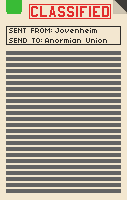
<style>
.page{position:relative;width:127px;height:200px;background:#f3e7d0}
.page>*{position:absolute;margin:0}
.t1{font:8px "04b03";color:#2e2c29}
</style>
<div class="page">
<p class="t1" style="left:9px;top:28px;width:43px;height:15px">SENT FROM:<br>SEND TO:</p>
<p class="t1" style="left:55px;top:28px;width:42px;height:5px">Jovenheim</p>
<p class="t1" style="left:45px;top:38px;width:62px;height:5px">Anormian Union</p>
</div>
